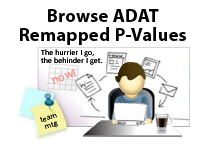
<style>
.page{position:relative;width:200px;height:150px;background:#ffffff}
.page>*{position:absolute;margin:0}
.t1{font:18.7px/18.7px "MyriadPro-Bold";letter-spacing:0.01em;color:#000000}
.t2{font:8px/8px "Calibri";letter-spacing:0.01em;color:#000000}
.t3{font:12px "MyriadPro-Regular";letter-spacing:0.01em;color:#fe9292}
.t4{font:8px/8px "Calibri";letter-spacing:0.01em;color:#030303}
</style>
<div class="page">
<p class="t1" style="left:20px;top:9px;width:166px;height:36px;text-align:center">Browse ADAT<br>Remapped P-Values</p>
<p class="t2" style="left:41px;top:49px;width:61px;height:16px">The hurrier I go,<br>the behinder I get.</p>
<p class="t3" style="left:51px;top:68px;width:25px;height:16px;rotate:-19deg">now!</p>
<p class="t4" style="left:40px;top:114px;width:18px;height:15px;text-align:center;rotate:-19deg">team<br>mtg</p>
</div>
